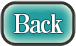
<style>
.page{position:relative;width:76px;height:46px}
.page>*{position:absolute;margin:0}
.t1{font:26px "RyuminPro-ExBold";letter-spacing:-0.08em;color:#ffffff;scale:0.9 1}
</style>
<div class="page">
<p class="t1" style="left:13px;top:14px;width:50px;height:19px">Back</p>
</div>
